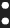
<style>
.page{position:relative;width:10px;height:28px;background:#212121}
.page>*{position:absolute;margin:0}
.t1{font:48px "CourierNewPS-BoldMT";color:#ffffff}
</style>
<div class="page">
<p class="t1" style="left:1px;top:2px;width:8px;height:23px">:</p>
</div>
